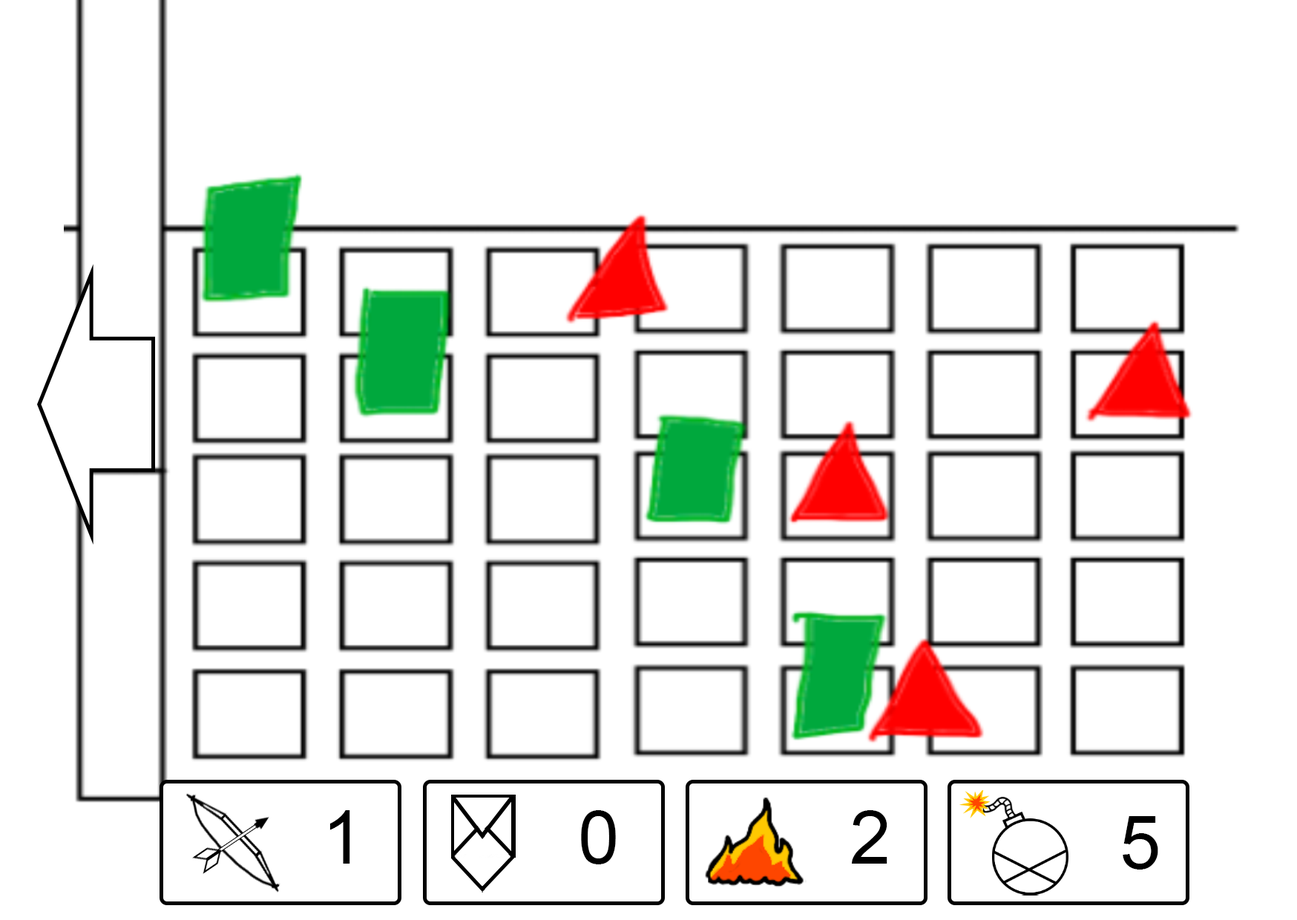
<style>
.page{position:relative;width:1297px;height:920px;background:#ffffff}
.page>*{position:absolute;margin:0}
.t1{font:74.2px "ArialMT";letter-spacing:-0.05em;color:#000000}
</style>
<div class="page">
<p class="t1" style="left:329px;top:810px;width:21px;height:53px">1</p>
<p class="t1" style="left:581px;top:810px;width:35px;height:54px">0</p>
<p class="t1" style="left:851px;top:810px;width:36px;height:53px">2</p>
<p class="t1" style="left:1122px;top:816px;width:36px;height:53px">5</p>
</div>
